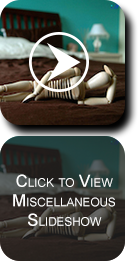
<style>
.page{position:relative;width:139px;height:271px}
.page>*{position:absolute;margin:0}
.t1{font:16.7px/19.4px "ArialMT";color:#ffffff;font-variant:small-caps}
</style>
<div class="page">
<p class="t1" style="left:13px;top:174px;width:102px;height:52px;text-align:center">Click to View Miscellaneous<br>Slideshow</p>
</div>
